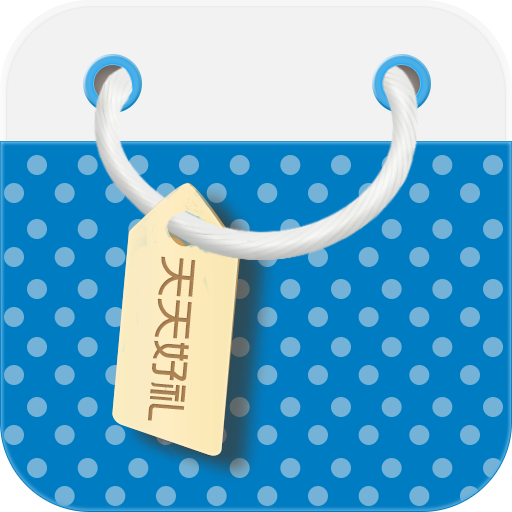
<style>
.page{position:relative;width:512px;height:512px;background:#007cc2}
.page>*{position:absolute;margin:0}
.t1{font:42px "TRENDS";color:#af8454}
</style>
<div class="page">
<p class="t1" style="left:148px;top:256px;width:48px;height:165px;rotate:95deg">天天好礼</p>
</div>
